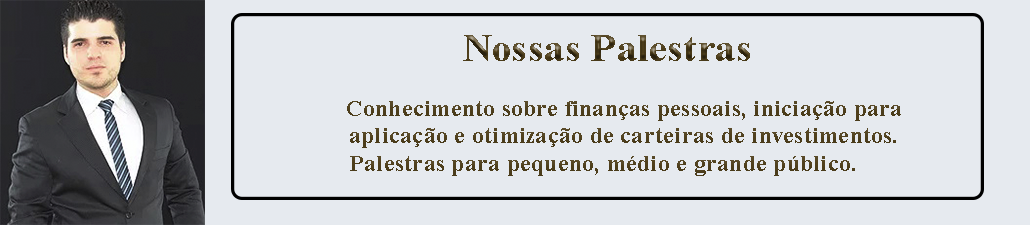
<style>
.page{position:relative;width:1030px;height:225px;background:#e6eaef}
.page>*{position:absolute;margin:0}
.t1{font:22.9px "TimesNewRomanPS-BoldMT";letter-spacing:0.01em;color:#473919;scale:1.05 1}
.t2{font:38.1px "TimesNewRomanPS-BoldMT";letter-spacing:0.01em;color:#473919;scale:1.05 1}
</style>
<div class="page">
<p class="t1" style="left:347px;top:35px;width:554px;height:141px;text-align:center"><span class="t2">N​ossas Palestras<br></span><br>             Conhecimento sobre finanças pessoais, iniciação para <br>    aplicação e otimização de carteiras de investimentos. <br>    Palestras para pequeno, médio e grande público.</p>
</div>
